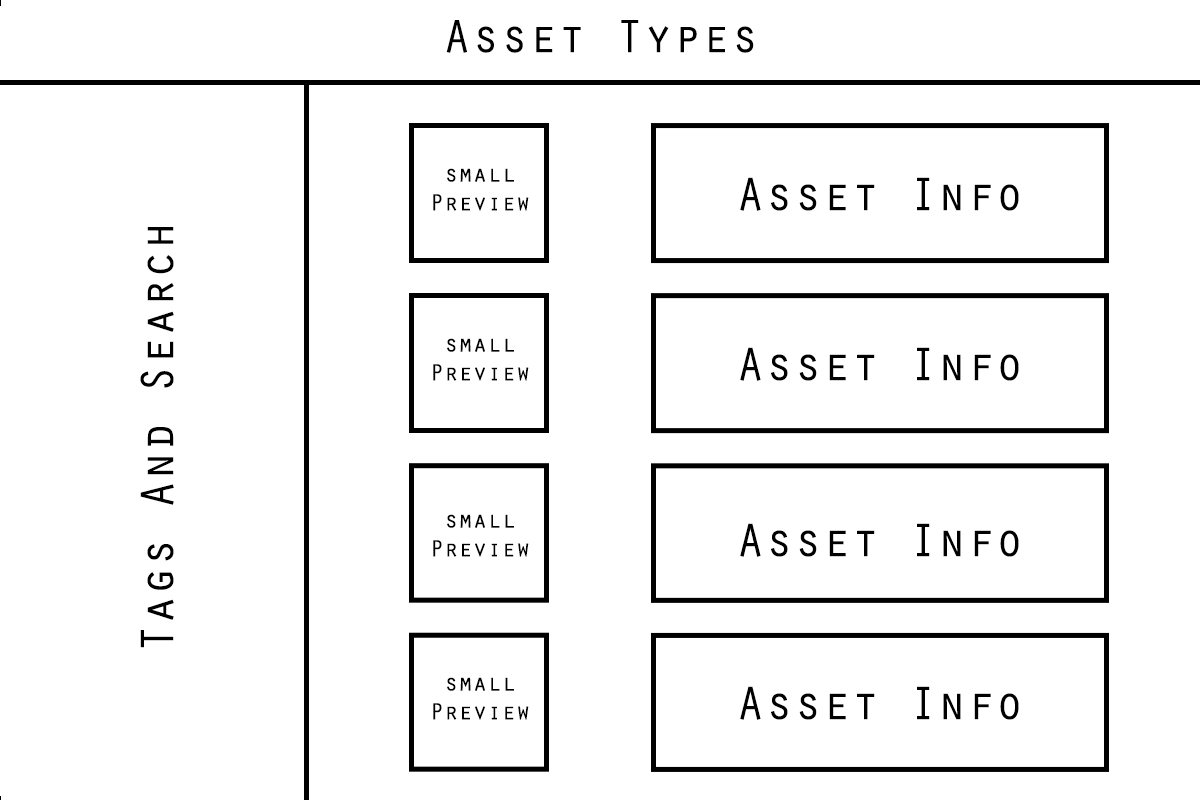
<style>
.page{position:relative;width:1200px;height:800px;background:#ffffff}
.page>*{position:absolute;margin:0}
.t1{font:48px "OratorStd";color:#000000}
.t2{font:24px "OratorStd";color:#000000}
</style>
<div class="page">
<p class="t1" style="left:446px;top:20px;width:308px;height:33px">Asset Types</p>
<p class="t2" style="left:433px;top:168px;width:96px;height:43px;text-align:center">small<br>Preview</p>
<p class="t1" style="left:740px;top:177px;width:279px;height:34px">Asset Info</p>
<p class="t1" style="left:140px;top:227px;width:34px;height:421px;rotate:-90deg">Tags And Search</p>
<p class="t2" style="left:433px;top:338px;width:96px;height:43px;text-align:center">small<br>Preview</p>
<p class="t1" style="left:740px;top:347px;width:279px;height:34px">Asset Info</p>
<p class="t2" style="left:433px;top:514px;width:96px;height:43px;text-align:center">small<br>Preview</p>
<p class="t1" style="left:740px;top:523px;width:279px;height:34px">Asset Info</p>
<p class="t2" style="left:433px;top:677px;width:96px;height:43px;text-align:center">small<br>Preview</p>
<p class="t1" style="left:740px;top:686px;width:279px;height:34px">Asset Info</p>
</div>
